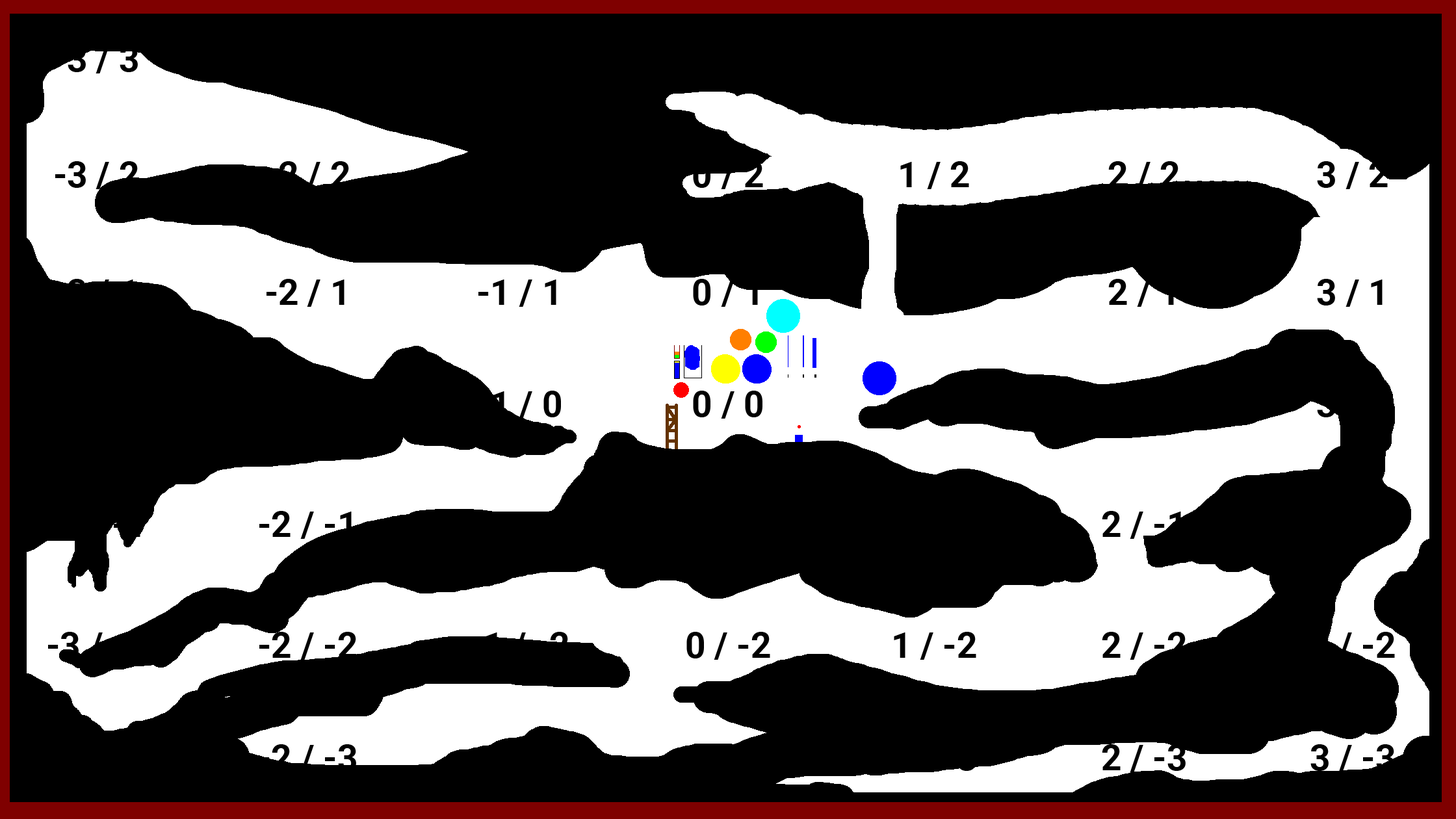
<style>
.page{position:relative;width:1456px;height:819px;background:#000000}
.page>*{position:absolute;margin:0}
.t1{font:35.9px "Roboto-Bold";color:#000000}
</style>
<div class="page">
<p class="t1" style="left:55px;top:45px;width:83px;height:28px">-3 / 3</p>
<p class="t1" style="left:55px;top:161px;width:83px;height:28px">-3 / 2</p>
<p class="t1" style="left:266px;top:161px;width:84px;height:28px">-2 / 2</p>
<p class="t1" style="left:693px;top:161px;width:70px;height:28px">0 / 2</p>
<p class="t1" style="left:900px;top:161px;width:69px;height:28px">1 / 2</p>
<p class="t1" style="left:1108px;top:161px;width:71px;height:28px">2 / 2</p>
<p class="t1" style="left:1317px;top:161px;width:71px;height:28px">3 / 2</p>
<p class="t1" style="left:266px;top:279px;width:78px;height:28px">-2 / 1</p>
<p class="t1" style="left:478px;top:279px;width:78px;height:28px">-1 / 1</p>
<p class="t1" style="left:693px;top:279px;width:65px;height:28px">0 / 1</p>
<p class="t1" style="left:1108px;top:279px;width:66px;height:28px">2 / 1</p>
<p class="t1" style="left:1317px;top:279px;width:66px;height:28px">3 / 1</p>
<p class="t1" style="left:478px;top:391px;width:83px;height:28px">-1 / 0</p>
<p class="t1" style="left:693px;top:391px;width:69px;height:28px">0 / 0</p>
<p class="t1" style="left:259px;top:511px;width:93px;height:28px">-2 / -1</p>
<p class="t1" style="left:1102px;top:511px;width:79px;height:28px">2 / -1</p>
<p class="t1" style="left:48px;top:632px;width:98px;height:28px">-3 / -2</p>
<p class="t1" style="left:259px;top:632px;width:98px;height:28px">-2 / -2</p>
<p class="t1" style="left:686px;top:632px;width:84px;height:28px">0 / -2</p>
<p class="t1" style="left:894px;top:632px;width:82px;height:28px">1 / -2</p>
<p class="t1" style="left:1102px;top:632px;width:84px;height:28px">2 / -2</p>
<p class="t1" style="left:1310px;top:632px;width:85px;height:28px">3 / -2</p>
<p class="t1" style="left:259px;top:744px;width:97px;height:28px">-2 / -3</p>
<p class="t1" style="left:1102px;top:744px;width:84px;height:28px">2 / -3</p>
<p class="t1" style="left:1310px;top:744px;width:84px;height:28px">3 / -3</p>
</div>
